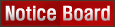
<style>
.page{position:relative;width:115px;height:27px}
.page>*{position:absolute;margin:0}
.t1{font:17px "H2hdrM"}
</style>
<div class="page">
<p class="t1" style="left:5px;top:5px;width:105px;height:16px">Notice Board</p>
</div>
